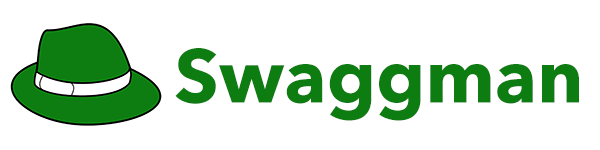
<style>
.page{position:relative;width:600px;height:150px;background:#ffffff}
.page>*{position:absolute;margin:0}
.t1{font:75px "AvenirNext-Bold";color:#0e7d11}
</style>
<div class="page">
<p class="t1" style="left:175px;top:48px;width:404px;height:73px">Swaggman</p>
</div>
